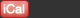
<style>
.page{position:relative;width:80px;height:18px;background:#333333}
.page>*{position:absolute;margin:0}
.t1{font:12px "Helvetica";color:#ffffff;font-weight:bold}
</style>
<div class="page">
<p class="t1" style="left:3px;top:4px;width:22px;height:10px">iCal</p>
</div>
